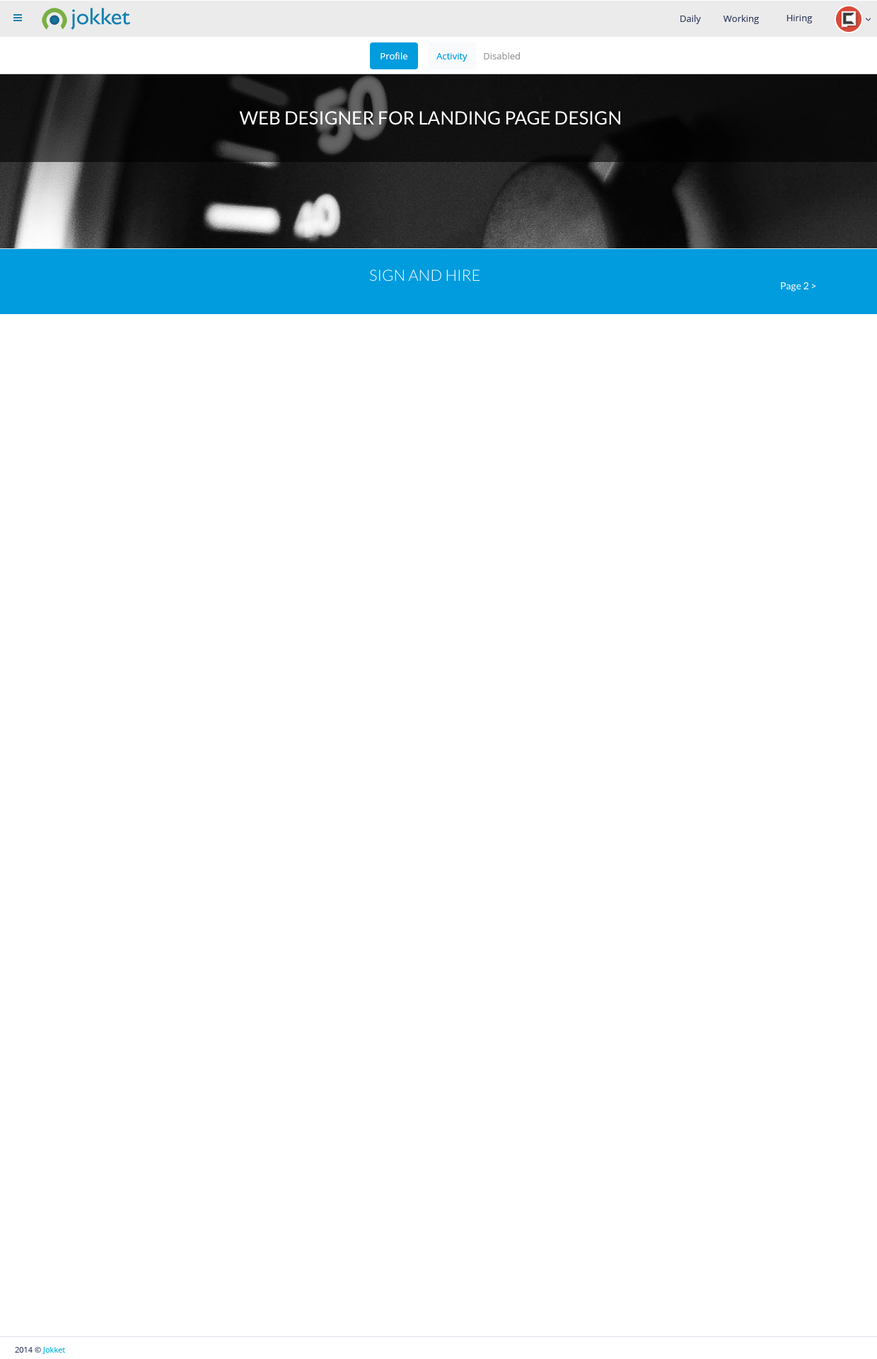
<style>
.page{position:relative;width:877px;height:1359px;background:#ffffff}
.page>*{position:absolute;margin:0}
.t1{font:9.2px "OpenSans";color:#394263}
.t2{font:9.2px "OpenSans";color:#ffffff}
.t3{font:9.2px "OpenSans";color:#009cde}
.t4{font:9.2px "OpenSans";color:#999999}
.t5{font:7.8px "OpenSans";color:#394263}
.t6{font:7.8px "OpenSans";color:#0dbae1}
</style>
<div class="page">
<p class="t1" style="left:681px;top:15px;width:20px;height:9px">Daily</p>
<p class="t1" style="left:723px;top:15px;width:36px;height:9px">Working</p>
<p class="t1" style="left:787px;top:15px;width:26px;height:8px">Hiring</p>
<p class="t2" style="left:381px;top:52px;width:27px;height:7px">Profile</p>
<p class="t3" style="left:437px;top:53px;width:31px;height:9px">Activity</p>
<p class="t4" style="left:484px;top:52px;width:36px;height:7px">Disabled</p>
<p class="t5" style="left:15px;top:1347px;width:50px;height:7px">2014 © <span class="t6">Jokket</span></p>
</div>
